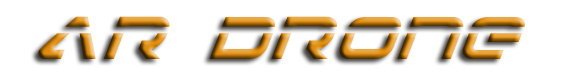
<style>
.page{position:relative;width:563px;height:75px;background:#ffffff}
.page>*{position:absolute;margin:0}
.t1{font:90px "4114BlasterLaserItalic"}
</style>
<div class="page">
<p class="t1" style="left:38px;top:16px;width:487px;height:43px">AR DRONE</p>
</div>
